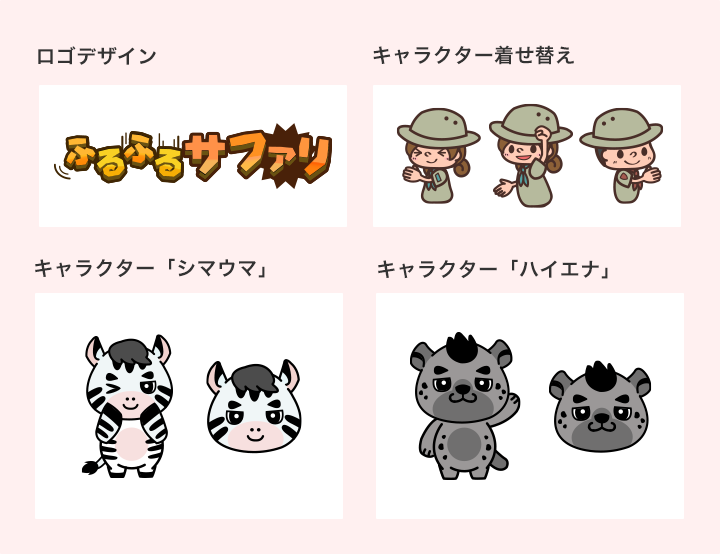
<style>
.page{position:relative;width:720px;height:554px;background:#fff0f0}
.page>*{position:absolute;margin:0}
.t1{font:20px "HiraKakuProN-W6";letter-spacing:0.02em;color:#333333}
</style>
<div class="page">
<p class="t1" style="left:38px;top:46px;width:118px;height:19px">ロゴデザイン</p>
<p class="t1" style="left:373px;top:45px;width:201px;height:20px">キャラクター着せ替え</p>
<p class="t1" style="left:35px;top:258px;width:230px;height:20px">キャラクター「シマウマ」</p>
<p class="t1" style="left:378px;top:259px;width:230px;height:20px">キャラクター「ハイエナ」</p>
</div>
